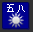
<style>
.page{position:relative;width:33px;height:32px;background:#000090}
.page>*{position:absolute;margin:0}
.t1{font:10.4px "SimSun";color:#ffffff}
</style>
<div class="page">
<p class="t1" style="left:7px;top:4px;width:18px;height:9px">五八</p>
</div>
